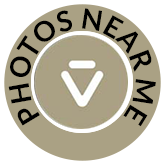
<style>
.page{position:relative;width:165px;height:165px;background:#aaa184}
.page>*{position:absolute;margin:0}
.t1{font:28px "Lato-Bold";color:#000000}
</style>
<div class="page">
<p class="t1" style="left:8px;top:8px;width:148px;height:119px;text-align:center">PHOTOS NEAR ME</p>
</div>
